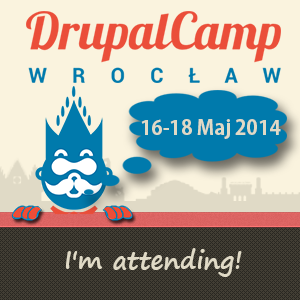
<style>
.page{position:relative;width:300px;height:300px;background:#faf3de}
.page>*{position:absolute;margin:0}
.t1{font:20px "KozGoPr6N-Bold";color:#e0dac6}
.t2{font:25px "SegoePrint-Bold";color:#e0dac6}
</style>
<div class="page">
<p class="t1" style="left:141px;top:119px;width:140px;height:20px">16-18 Maj 2014</p>
<p class="t2" style="left:66px;top:248px;width:176px;height:29px">I'm attending!</p>
</div>
